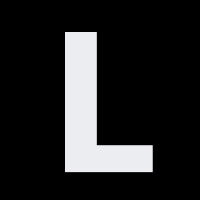
<style>
.page{position:relative;width:200px;height:200px;background:#000000}
.page>*{position:absolute;margin:0}
.t1{font:208.3px "MyriadPro-Bold";color:#ecedf1}
</style>
<div class="page">
<p class="t1" style="left:65px;top:32px;width:88px;height:141px">L</p>
</div>
